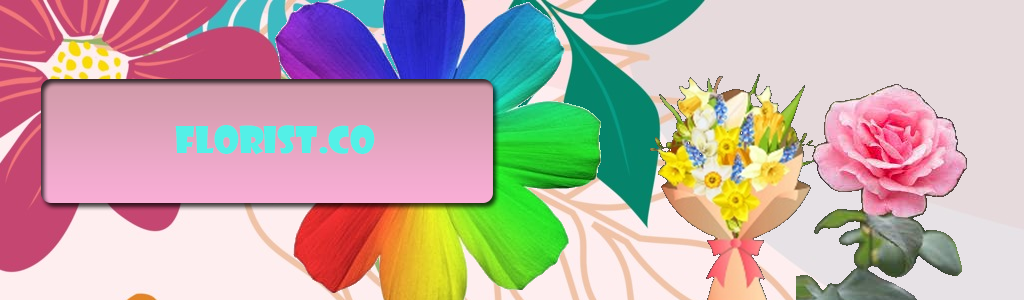
<style>
.page{position:relative;width:1024px;height:300px}
.page>*{position:absolute;margin:0}
.t1{font:36px "ShowcardGothic-Reg";color:#53f0e7}
</style>
<div class="page">
<p class="t1" style="left:175px;top:125px;width:200px;height:30px">Florist.co</p>
</div>
